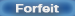
<style>
.page{position:relative;width:75px;height:16px}
.page>*{position:absolute;margin:0}
.t1{font:11px "HelveticaNeue-Bold";color:#ffffff;font-weight:bold;scale:1.31 1}
</style>
<div class="page">
<p class="t1" style="left:16px;top:4px;width:43px;height:9px">Forfeit</p>
</div>
